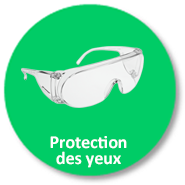
<style>
.page{position:relative;width:185px;height:185px;background:#00cc66}
.page>*{position:absolute;margin:0}
.t1{font:18px/16px "Calibri-Bold";color:#ffffff}
</style>
<div class="page">
<p class="t1" style="left:50px;top:136px;width:77px;height:32px;text-align:center">Protection  <br>des yeux</p>
</div>
